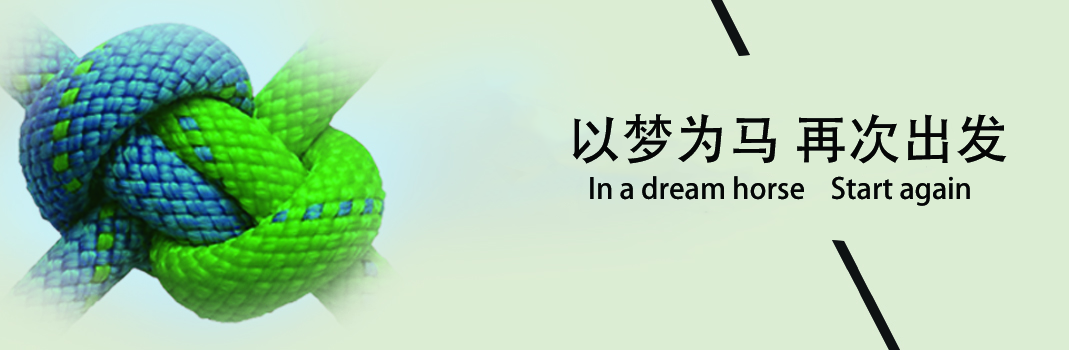
<style>
.page{position:relative;width:1069px;height:350px;background:#dbedd3}
.page>*{position:absolute;margin:0}
.t1{font:53.7px "AdobeHeitiStd-Regular";color:#000000}
.t2{font:28.7px "AdobeHeitiStd-Regular";color:#000000}
</style>
<div class="page">
<p class="t1" style="left:572px;top:114px;width:435px;height:50px">以梦为马 再次出发</p>
<p class="t2" style="left:590px;top:176px;width:380px;height:30px">In a dream horse    Start again</p>
</div>
